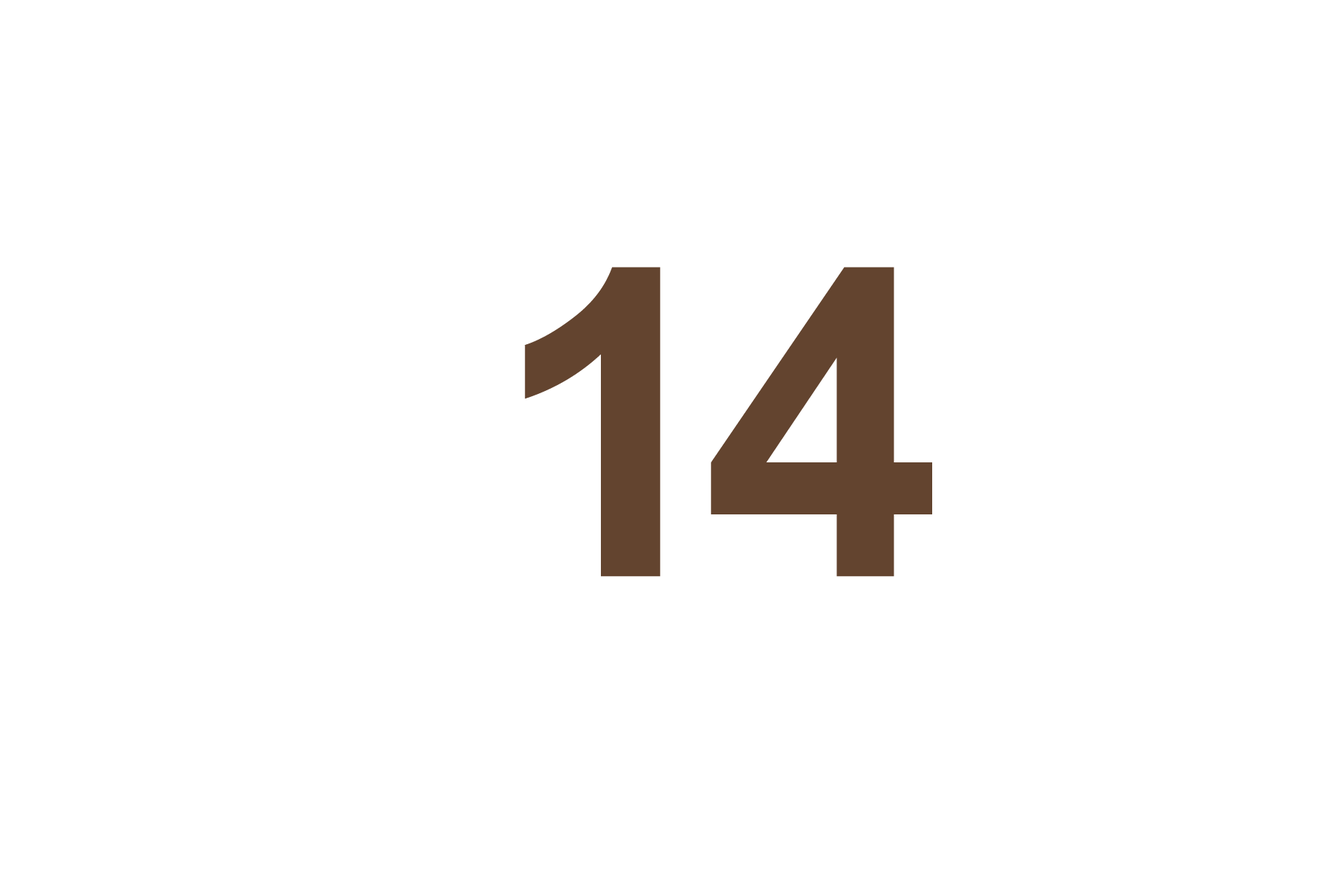
<style>
.page{position:relative;width:1337px;height:892px;background:#ffffff}
.page>*{position:absolute;margin:0}
.t1{font:429.6px "Arial-BoldMT";color:#63442f}
</style>
<div class="page">
<p class="t1" style="left:525px;top:267px;width:407px;height:310px">14</p>
</div>
